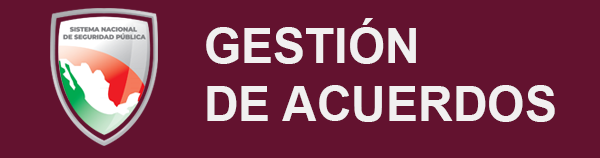
<style>
.page{position:relative;width:600px;height:158px;background:#63122f}
.page>*{position:absolute;margin:0}
.t1{font:48px "Arial-BoldMT";color:#f1f0f0}
</style>
<div class="page">
<p class="t1" style="left:206px;top:18px;width:349px;height:104px">GESTIÓN <br>DE ACUERDOS</p>
</div>
